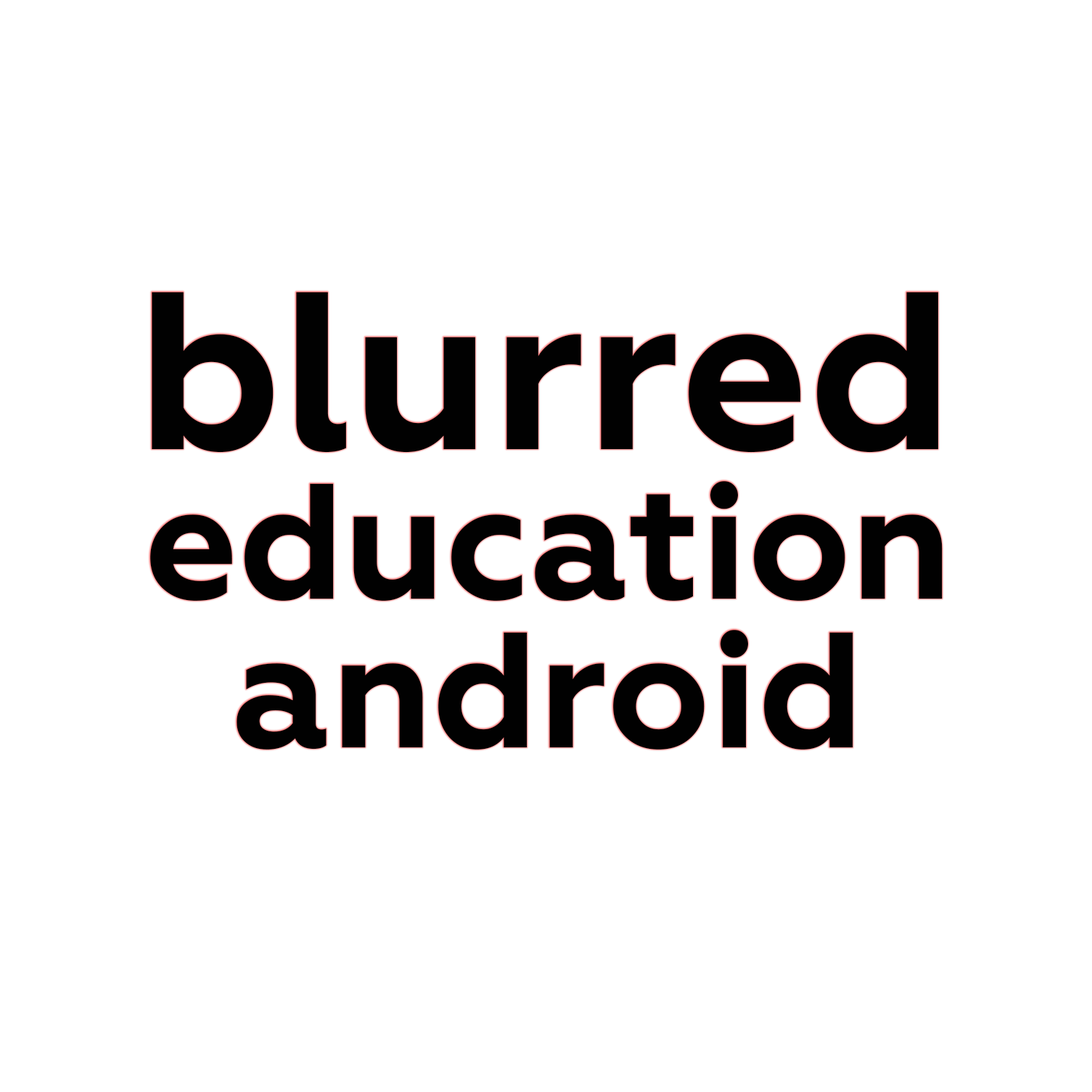
<style>
.page{position:relative;width:1092px;height:1092px;background:#ffffff}
.page>*{position:absolute;margin:0}
.t1{font:224.2px "Geometria-Bold";color:#010101}
.t2{font:164px "Geometria-Bold";color:#010101}
</style>
<div class="page">
<p class="t1" style="left:152px;top:292px;width:786px;height:161px">blurred</p>
<p class="t2" style="left:150px;top:481px;width:793px;height:120px">education</p>
<p class="t2" style="left:237px;top:630px;width:616px;height:120px">android</p>
</div>
